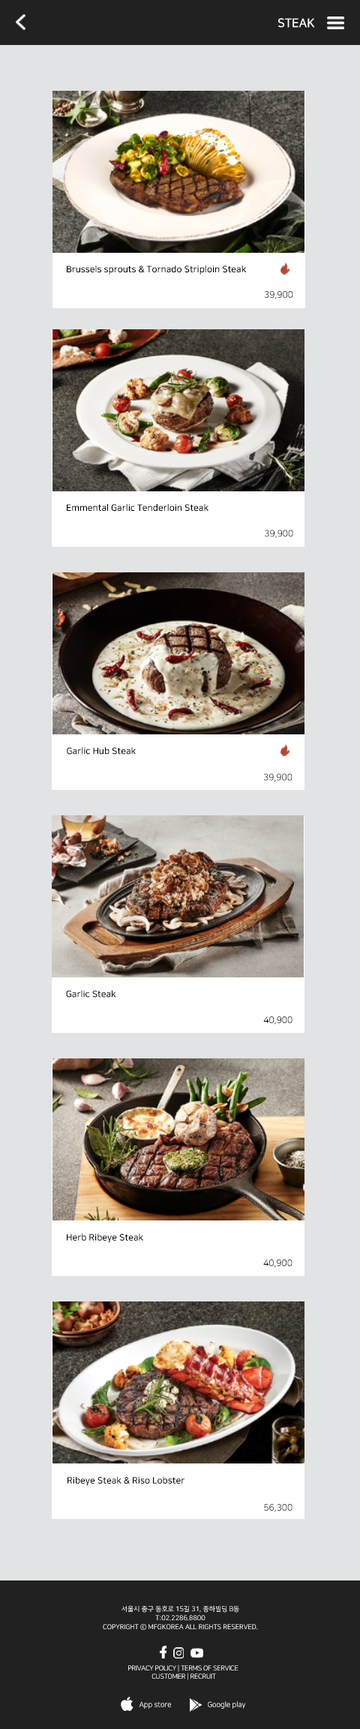
<style>
.page{position:relative;width:360px;height:1729px;background:#e1e3e4}
.page>*{position:absolute;margin:0}
.t1{font:12px "NanumSquareB";color:#ffffff}
.t2{font:9px "NanumSquareB";color:#000000}
.t3{font:9px "NanumSquareR"}
.t4{font:9px "NanumSquareR";color:#000000}
.t5{font:6.8px/9px "NanumSquareR";color:#ffffff}
.t6{font:6.8px "NanumSquareR";letter-spacing:-0.025em;color:#ffffff}
.t7{font:7.3px "NanumSquareR"}
</style>
<div class="page">
<p class="t1" style="left:278px;top:18px;width:37px;height:10px">STEAK</p>
<p class="t2" style="left:67px;top:266px;width:180px;height:9px">Brussels sprouts &amp; Tornado Striploin Steak</p>
<p class="t3" style="left:264px;top:291px;width:29px;height:8px">39,900</p>
<p class="t2" style="left:67px;top:504px;width:142px;height:8px">Emmental Garlic Tenderloin Steak</p>
<p class="t4" style="left:265px;top:530px;width:28px;height:8px">39,900</p>
<p class="t2" style="left:67px;top:747px;width:69px;height:8px">Garlic Hub Steak</p>
<p class="t3" style="left:263px;top:773px;width:30px;height:9px">39,900</p>
<p class="t2" style="left:66px;top:990px;width:50px;height:8px">Garlic Steak</p>
<p class="t4" style="left:263px;top:1016px;width:30px;height:9px">40,900</p>
<p class="t2" style="left:67px;top:1233px;width:76px;height:10px">Herb Ribeye Steak</p>
<p class="t4" style="left:263px;top:1259px;width:30px;height:9px">40,900</p>
<p class="t2" style="left:68px;top:1476px;width:117px;height:10px">Ribeye Steak &amp; Riso Lobster</p>
<p class="t3" style="left:264px;top:1504px;width:29px;height:8px">56,300</p>
<p class="t5" style="left:103px;top:1605px;width:155px;height:25px;text-align:center">서울시 중구 동호로 15길 31, 종하빌딩 B동<br>T:02.2286.8800<br>COPYRIGHT ⓒ MFGKOREA ALL RIGHTS RESERVED.</p>
<p class="t6" style="left:128px;top:1664px;width:111px;height:16px;text-align:center">PRIVACY POLICY | TERMS OF SERVICE <br>CUSTOMER | RECRUIT</p>
<p class="t7" style="left:139px;top:1701px;width:32px;height:8px">App store</p>
<p class="t7" style="left:208px;top:1701px;width:38px;height:8px">Google play</p>
</div>
